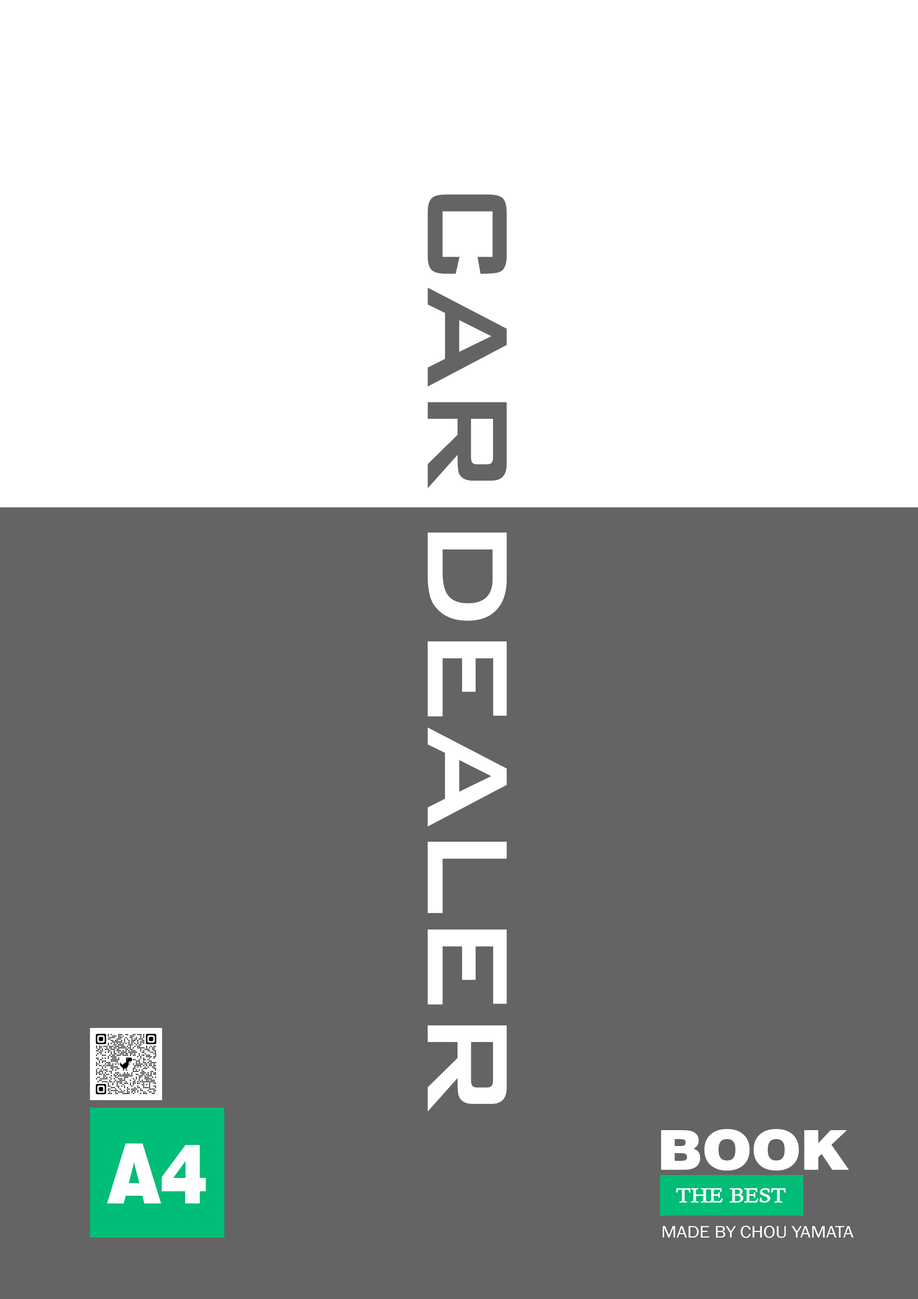
<style>
.page{position:relative;width:918px;height:1299px;background:#646464}
.page>*{position:absolute;margin:0}
.t1{font:54.9px "Swiss721BT-Black";letter-spacing:-0.01em;color:#ffffff;scale:1.1 1}
.t2{font:83.4px "Swiss721BT-Black";letter-spacing:-0.01em;color:#ffffff;scale:0.87 1}
.t3{font:20.5px "Ah-Ja-Thom-Content";letter-spacing:-0.01em;color:#ffffff;scale:1.1 1}
.t4{font:17.5px "AA-Khmer-AngDaunTep";letter-spacing:-0.01em;color:#ffffff;scale:1.11 1}
</style>
<div class="page">
<p class="t1" style="left:661px;top:1129px;width:188px;height:41px">BOOK</p>
<p class="t2" style="left:107px;top:1143px;width:99px;height:60px">A4</p>
<p class="t3" style="left:676px;top:1188px;width:110px;height:14px">THE BEST</p>
<p class="t4" style="left:663px;top:1225px;width:191px;height:13px">MADE BY CHOU YAMATA</p>
</div>
